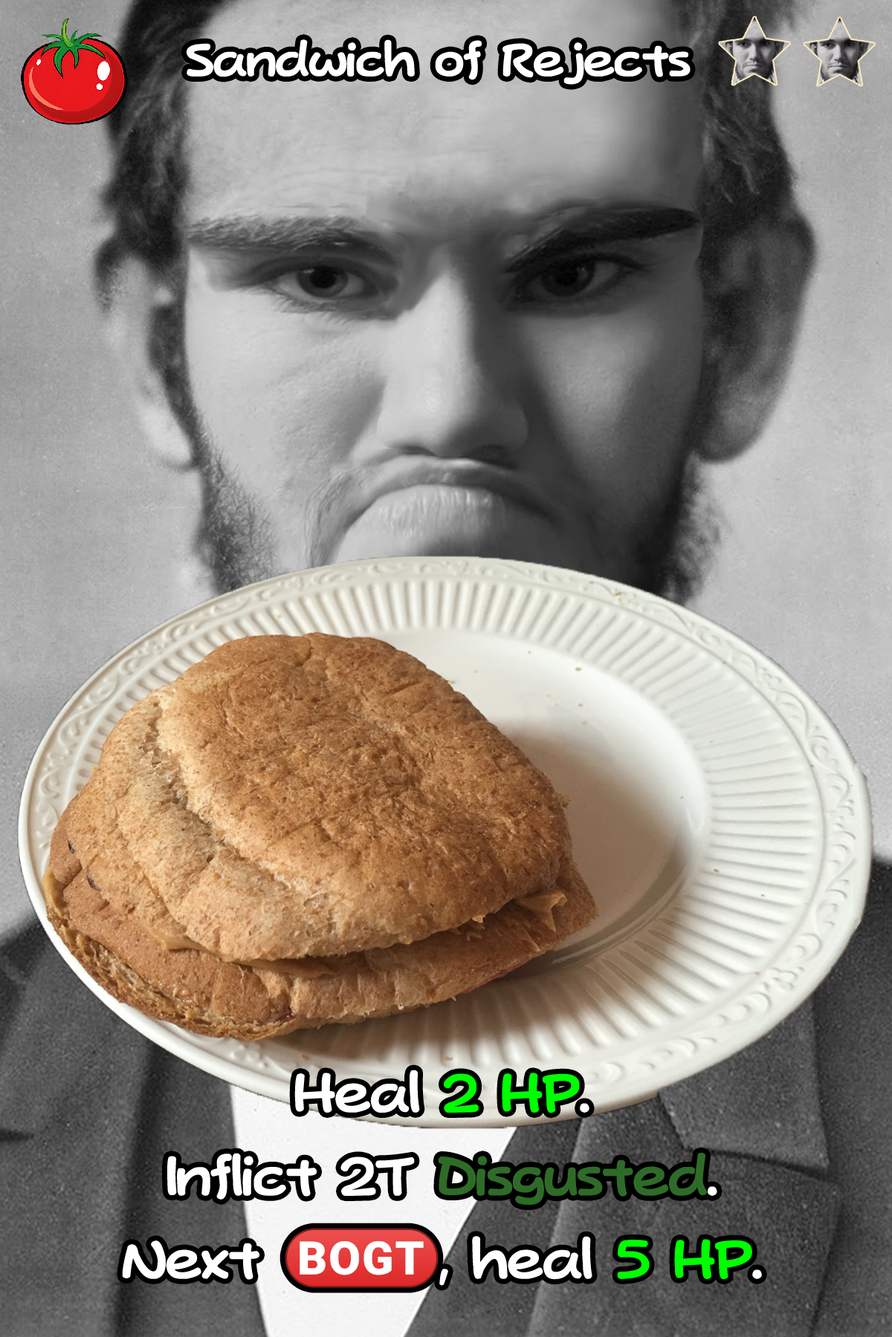
<style>
.page{position:relative;width:892px;height:1337px}
.page>*{position:absolute;margin:0}
.t1{font:89.2px "SuperMarioScript2Demo-Regular";color:#ffffff}
.t2{font:104px/83.2px "SuperMarioScript2Demo-Regular";color:#ffffff}
.t3{font:104px/83.2px "SuperMarioScript2Demo-Regular";color:#00ff00}
.t4{font:104px/83.2px "SuperMarioScript2Demo-Regular";color:#2f6b28}
.t5{font:104px/83.2px "stoogedings-Regular";color:#ffffff}
</style>
<div class="page">
<p class="t1" style="left:186px;top:39px;width:504px;height:46px">Sandwich of Rejects</p>
<p class="t2" style="left:122px;top:1070px;width:640px;height:218px;text-align:center">Heal <span class="t3">2 HP</span>.<br>Inflict 2T <span class="t4">Disgusted</span>.<br>Next <span class="t5">(BOGT)</span>, heal <span class="t3">5 HP</span>.</p>
</div>
